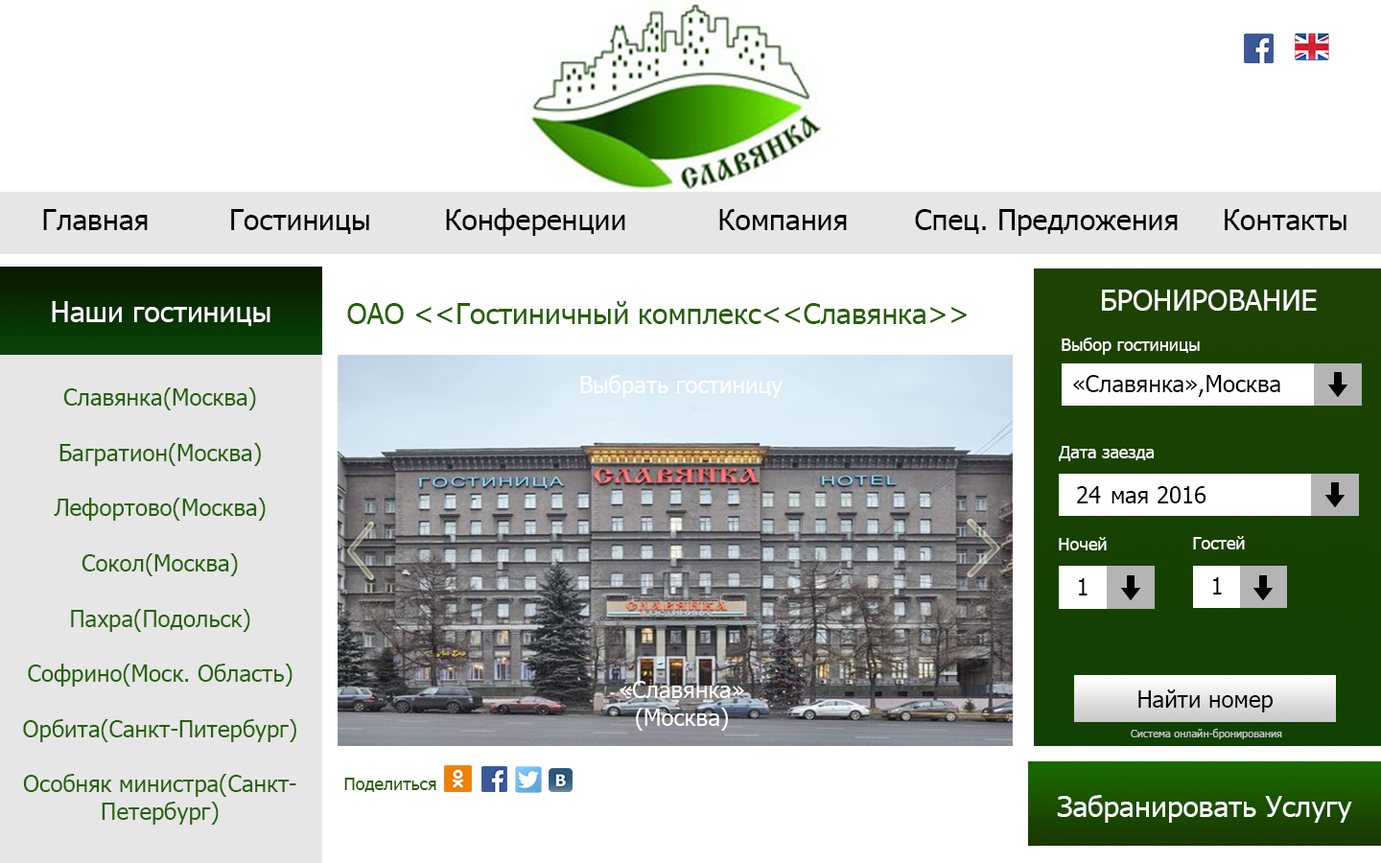
<style>
.page{position:relative;width:1381px;height:863px;background:#ffffff}
.page>*{position:absolute;margin:0}
.t1{font:28.8px "Tahoma";color:#000000}
.t2{font:28.8px "Tahoma";color:#ffffff}
.t3{font:28.8px "Tahoma";color:#fefefe}
.t4{font:28.8px "Tahoma";color:#266000}
.t5{font:17.3px "Tahoma";color:#ffffff}
.t6{font:23px "Tahoma";color:#ffffff}
.t7{font:23px "Tahoma";color:#000000}
.t8{font:23px "Tahoma";color:#236301}
.t9{font:10.6px "Tahoma";color:#c7c5c5}
.t10{font:17.3px "Tahoma";color:#266000}
</style>
<div class="page">
<p class="t1" style="left:43px;top:209px;width:105px;height:21px">Главная</p>
<p class="t1" style="left:231px;top:209px;width:138px;height:25px">Гостиницы</p>
<p class="t1" style="left:446px;top:208px;width:179px;height:28px">Конференции</p>
<p class="t1" style="left:719px;top:209px;width:128px;height:21px">Компания</p>
<p class="t1" style="left:915px;top:209px;width:263px;height:27px">Спец. Предложения</p>
<p class="t1" style="left:1225px;top:209px;width:122px;height:21px">Контакты</p>
<p class="t2" style="left:1102px;top:290px;width:215px;height:21px">БРОНИРОВАНИЕ</p>
<p class="t3" style="left:52px;top:301px;width:218px;height:25px">Наши гостиницы</p>
<p class="t4" style="left:347px;top:301px;width:620px;height:23px">ОАО &lt;&lt;Гостиничный комплекс&lt;&lt;Славянка&gt;&gt;</p>
<p class="t5" style="left:1062px;top:338px;width:138px;height:17px">Выбор гостиницы</p>
<p class="t6" style="left:580px;top:375px;width:203px;height:23px">Выбрать гостиницу</p>
<p class="t7" style="left:1073px;top:375px;width:208px;height:22px">«Славянка»,Москва</p>
<p class="t8" style="left:23px;top:388px;width:273px;height:437px;text-align:center">Славянка(Москва)<br><br>Багратион(Москва)<br><br>Лефортово(Москва)<br><br>Сокол(Москва)<br><br>Пахра(Подольск)<br><br>Софрино(Моск. Область)<br><br>Орбита(Санкт-Питербург)<br><br>Особняк министра(Санкт-<br>Петербург)</p>
<p class="t5" style="left:1059px;top:446px;width:95px;height:15px">Дата заезда</p>
<p class="t7" style="left:1077px;top:486px;width:130px;height:18px">24  мая 2016</p>
<p class="t5" style="left:1059px;top:537px;width:48px;height:14px">Ночей</p>
<p class="t5" style="left:1193px;top:536px;width:52px;height:14px">Гостей</p>
<p class="t7" style="left:1079px;top:578px;width:9px;height:18px">1</p>
<p class="t7" style="left:1213px;top:577px;width:9px;height:18px">1</p>
<p class="t6" style="left:620px;top:681px;width:124px;height:50px;text-align:center">«Славянка»<br>(Москва)</p>
<p class="t7" style="left:1139px;top:690px;width:134px;height:23px">Найти номер</p>
<p class="t9" style="left:1131px;top:729px;width:151px;height:11px">Система онлайн-бронирования</p>
<p class="t10" style="left:344px;top:778px;width:92px;height:14px">Поделиться</p>
<p class="t2" style="left:1057px;top:795px;width:295px;height:28px">Забранировать Услугу</p>
</div>
